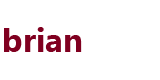
<style>
.page{position:relative;width:160px;height:80px;background:#ffffff}
.page>*{position:absolute;margin:0}
.t1{font:33.3px "Ebrima-Bold";color:#800020}
.t2{font:33.3px "Ebrima-Bold";color:#ffffff}
</style>
<div class="page">
<p class="t1" style="left:4px;top:27px;width:154px;height:25px">brian<span class="t2">liebe</span></p>
</div>
